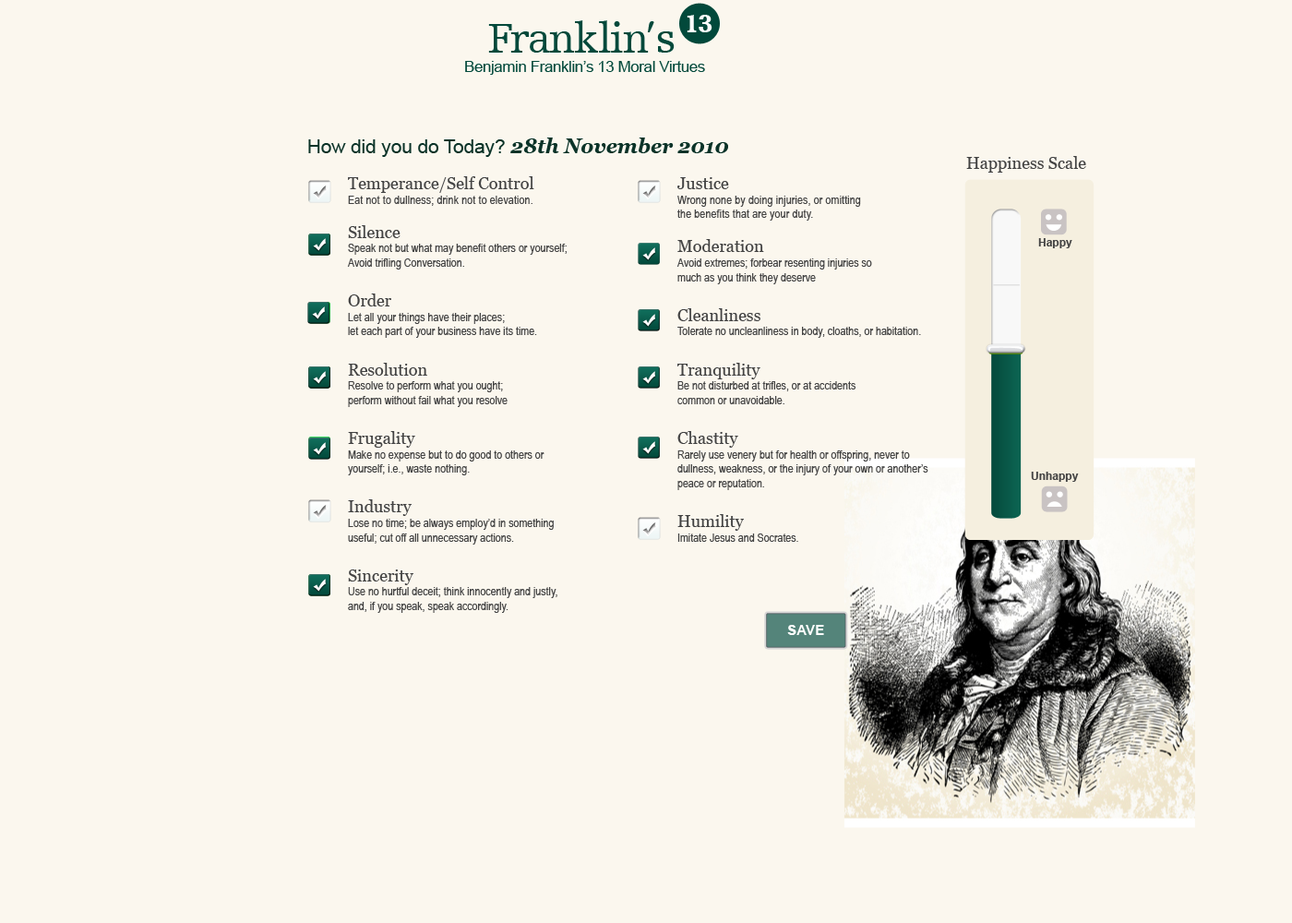
<style>
.page{position:relative;width:1292px;height:923px;background:#fbf7ee}
.page>*{position:absolute;margin:0}
.t1{font:26.3px "HumanistSlabserif712BT-Black";letter-spacing:-0.05em;color:#ffffff}
.t2{font:43.4px "HumanistSlabserif712BT-Roman";letter-spacing:-0.025em;color:#02493b}
.t3{font:15.7px "ArialMT";letter-spacing:-0.025em;color:#02493b}
.t4{font:19.1px "ArialMT";color:#0b3328}
.t5{font:20.2px "Georgia-BoldItalic";color:#0b3328}
.t6{font:16.6px "Georgia";color:#434343}
.t7{font:12px "ArialNarrow";color:#434343}
.t8{font:16.6px/33.2px "Georgia";color:#434343}
.t9{font:12px "ArialNarrow";letter-spacing:0.01em;color:#434343}
.t10{font:11.1px "Arial-BoldMT";color:#434343}
.t11{font:14px "Arial-BoldMT";color:#ffffff}
</style>
<div class="page">
<p class="t1" style="left:687px;top:15px;width:25px;height:17px">13</p>
<p class="t2" style="left:488px;top:20px;width:187px;height:33px">Franklin’s</p>
<p class="t3" style="left:465px;top:61px;width:240px;height:14px">Benjamin Franklin’s 13 Moral Virtues</p>
<p class="t4" style="left:308px;top:138px;width:420px;height:19px">How did you do Today? <span class="t5">28th November 2010</span></p>
<p class="t6" style="left:966px;top:156px;width:120px;height:17px">Happiness Scale</p>
<p class="t7" style="left:347px;top:176px;width:220px;height:437px"><span class="t8">Temperance/Self Control<br></span><span class="t9">Eat not to dullness; drink not to elevation.<br><br></span><span class="t6">Silence<br></span>Speak not but what may benefit others or yourself; <br>Avoid trifling Conversation.<br><span class="t6"><br>Order<br></span>Let all your things have their places; <br>let each part of your business have its time.<br><span class="t6"><br>Resolution<br></span>Resolve to perform what you ought; <br>perform without fail what you resolve<br><span class="t6"><br>Frugality<br></span>Make no expense but to do good to others or <br>yourself; i.e., waste nothing.<br><span class="t6"><br>Industry<br></span>Lose no time; be always employ’d in something <br>useful; cut off all unnecessary actions.<span class="t6"><br><br>Sincerity<br></span>Use no hurtful deceit; think innocently and justly, <br>and, if you speak, speak accordingly.</p>
<p class="t7" style="left:676px;top:177px;width:252px;height:365px"><span class="t8">Justice<br></span><span class="t9">Wrong none by doing injuries, or omitting <br>the benefits that are your duty.<br><br></span><span class="t6">Moderation<br></span>Avoid extremes; forbear resenting injuries so <br>much as you think they deserve<br><span class="t6"><br>Cleanliness<br></span>Tolerate no uncleanliness in body, cloaths, or habitation.<br><span class="t6"><br>Tranquility<br></span>Be not disturbed at trifles, or at accidents <br>common or unavoidable.<br><span class="t6"><br>Chastity<br></span>Rarely use venery but for health or offspring, never to <br>dullness, weakness, or the injury of your own or another’s <br>peace or reputation.<br><span class="t6"><br>Humility<br></span>Imitate Jesus and Socrates.</p>
<p class="t10" style="left:1038px;top:238px;width:34px;height:10px">Happy</p>
<p class="t10" style="left:1031px;top:472px;width:48px;height:10px">Unhappy</p>
<p class="t11" style="left:787px;top:625px;width:37px;height:10px">SAVE</p>
</div>
